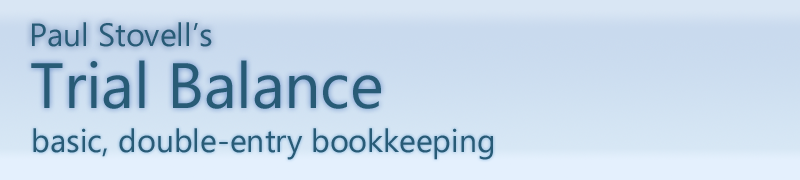
<style>
.page{position:relative;width:800px;height:180px}
.page>*{position:absolute;margin:0}
.t1{font:32px "SegoeUI";color:#275b76}
.t2{font:64px "SegoeUI";color:#285b76}
.t3{font:32px "SegoeUI";color:#285b76}
</style>
<div class="page">
<p class="t1" style="left:32px;top:22px;width:180px;height:25px">Paul Stovell’s</p>
<p class="t2" style="left:31px;top:60px;width:350px;height:49px">Trial Balance</p>
<p class="t3" style="left:33px;top:128px;width:460px;height:32px">basic, double-entry bookkeeping</p>
</div>
